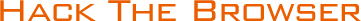
<style>
.page{position:relative;width:361px;height:21px;background:#ffffff}
.page>*{position:absolute;margin:0}
.t1{font:40px "BankGothic-Light";letter-spacing:-0.05em;color:#eb5e00}
</style>
<div class="page">
<p class="t1" style="left:0px;top:0px;width:361px;height:21px">Hack The Browser</p>
</div>
